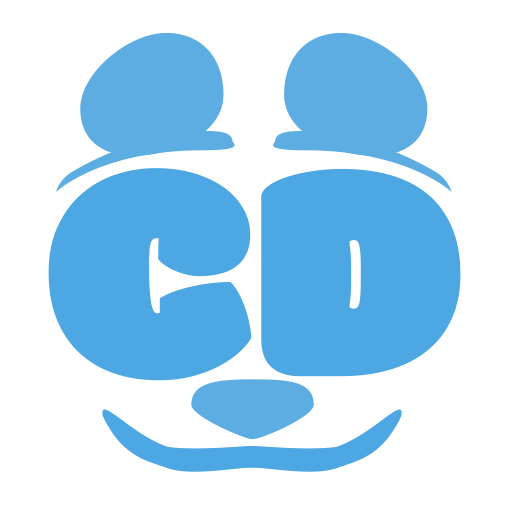
<style>
.page{position:relative;width:512px;height:512px;background:#ffffff}
.page>*{position:absolute;margin:0}
.t1{font:321.9px "Modak";color:#4da7e2;scale:1.05 1}
</style>
<div class="page">
<p class="t1" style="left:48px;top:168px;width:413px;height:213px">CD</p>
</div>
